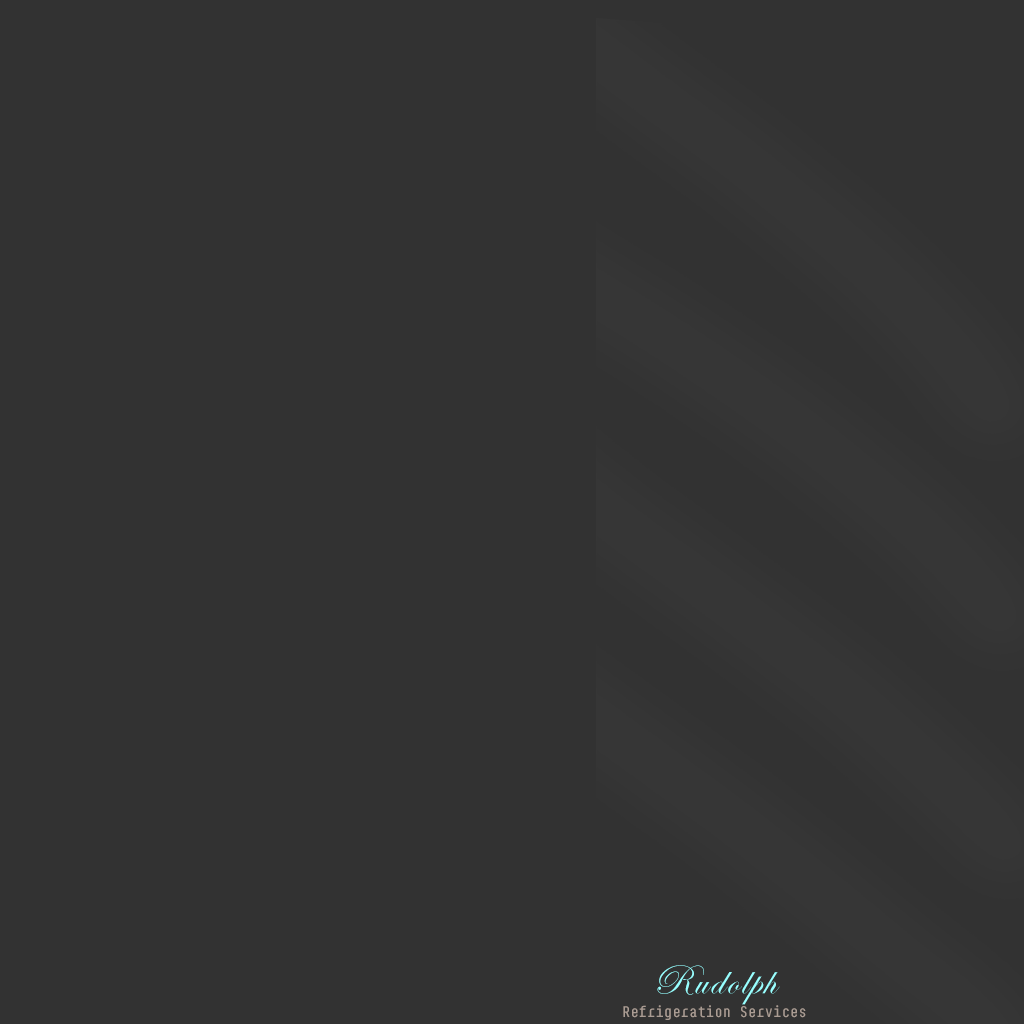
<style>
.page{position:relative;width:1024px;height:1024px;background:#323232}
.page>*{position:absolute;margin:0}
.t1{font:14px/24px "BCSklonar-Medium";letter-spacing:0.05em;color:#aa9c93}
.t2{font:42.4px/24px "EdwardianScriptITC";letter-spacing:0.05em;color:#99ffff}
</style>
<div class="page">
<p class="t1" style="left:623px;top:965px;width:183px;height:55px;text-align:center"><span class="t2">Rudolph<br></span>Refrigeration Services</p>
</div>
